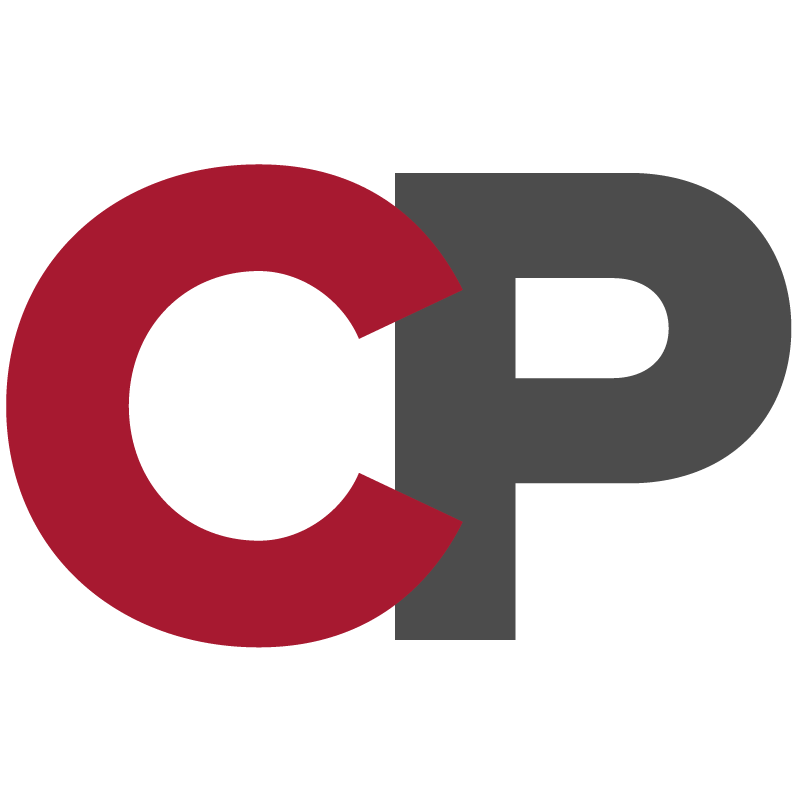
<style>
.page{position:relative;width:800px;height:800px;background:#ffffff}
.page>*{position:absolute;margin:0}
.t1{font:700px "ProximaNova-Extrabld";letter-spacing:-0.1em;color:#a71930}
.t2{font:700px "ProximaNova-Extrabld";letter-spacing:-0.1em;color:#4c4c4c}
</style>
<div class="page">
<p class="t1" style="left:6px;top:164px;width:457px;height:484px">C</p>
<p class="t2" style="left:395px;top:173px;width:397px;height:467px">P</p>
</div>
